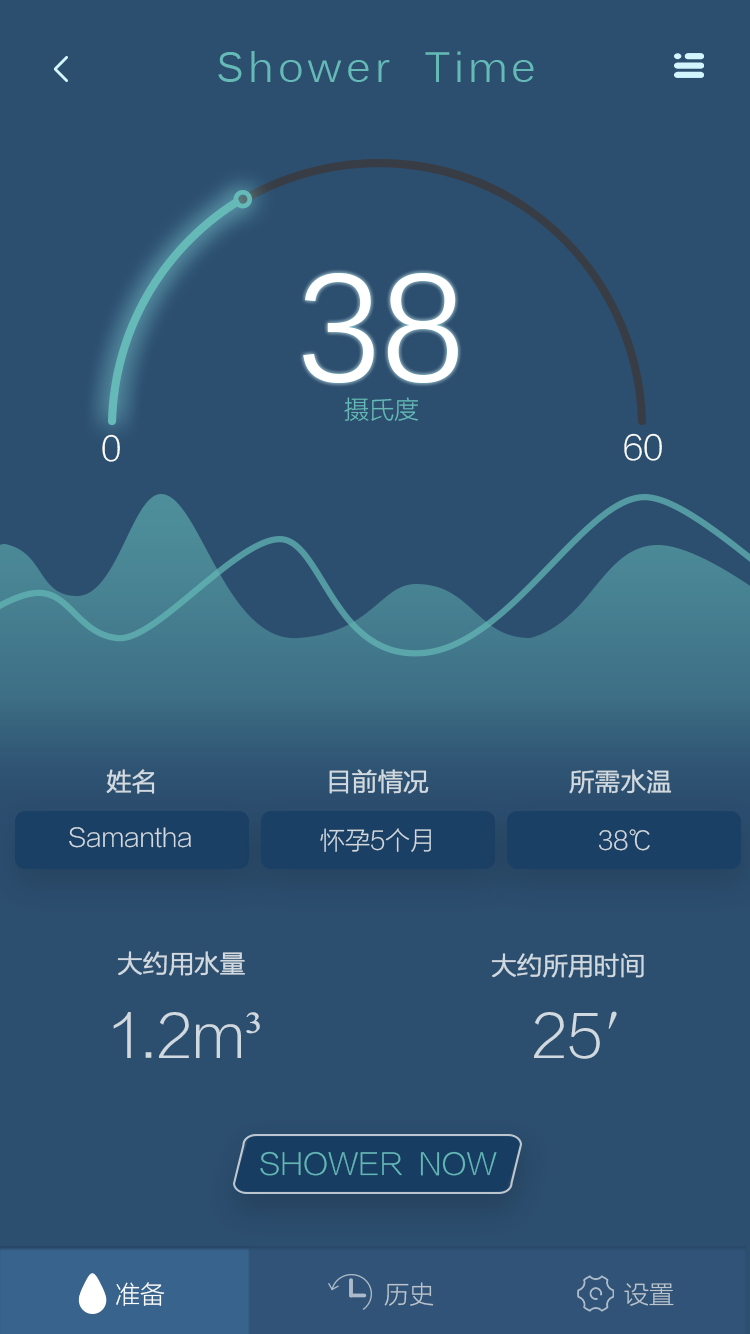
<style>
.page{position:relative;width:750px;height:1334px;background:#2c4e6f}
.page>*{position:absolute;margin:0}
.t1{font:41.7px "Kalinga";letter-spacing:0.1em;color:#65bab8}
.t2{font:150px "Kalinga";color:#ffffff}
.t3{font:25px "FZLTXHJW--GB1-0";color:#65bab8}
.t4{font:33.3px "FZLTXHJW--GB1-0";color:#f9fcfc}
.t5{font:25px "FZLTXHJW--GB1-0";color:#d0dae0;font-weight:bold}
.t6{font:25px "FZLTXHJW--GB1-0";color:#d0d9e0}
.t7{font:25px "FZLTXHJW--GB1-0";color:#d0d9e0;font-weight:bold}
.t8{font:58.3px "FZLTXHJW--GB1-0";color:#d0d9e0}
.t9{font:58.3px "SimSun";color:#d0d9e0}
.t10{font:29.2px "FZLTXHJW--GB1-0";color:#63b7b6}
.t11{font:25px "FZLTXHJW--GB1-0";color:#f9fcfc}
.t12{font:25px "FZLTXHJW--GB1-0";color:#bac4cd}
</style>
<div class="page">
<p class="t1" style="left:218px;top:51px;width:316px;height:31px">Shower  Time</p>
<p class="t2" style="left:303px;top:273px;width:155px;height:110px">38</p>
<p class="t3" style="left:344px;top:397px;width:74px;height:24px">摄氏度</p>
<p class="t4" style="left:102px;top:434px;width:18px;height:28px">0</p>
<p class="t4" style="left:624px;top:433px;width:38px;height:28px">60</p>
<p class="t5" style="left:106px;top:769px;width:49px;height:25px">姓名</p>
<p class="t5" style="left:329px;top:769px;width:100px;height:25px">目前情况</p>
<p class="t5" style="left:569px;top:769px;width:103px;height:25px">所需水温</p>
<p class="t6" style="left:69px;top:827px;width:122px;height:21px">Samantha</p>
<p class="t6" style="left:320px;top:828px;width:111px;height:24px">怀孕5个月</p>
<p class="t6" style="left:599px;top:829px;width:51px;height:22px">38℃</p>
<p class="t7" style="left:117px;top:951px;width:128px;height:25px">大约用水量</p>
<p class="t7" style="left:491px;top:953px;width:153px;height:25px">大约所用时间</p>
<p class="t8" style="left:113px;top:1012px;width:147px;height:46px">1.2m<span class="t9">³</span></p>
<p class="t8" style="left:534px;top:1011px;width:83px;height:48px">25′</p>
<p class="t10" style="left:260px;top:1151px;width:237px;height:25px">SHOWER  NOW</p>
<p class="t11" style="left:116px;top:1282px;width:49px;height:24px">准备</p>
<p class="t12" style="left:384px;top:1282px;width:50px;height:24px">历史</p>
<p class="t12" style="left:624px;top:1283px;width:50px;height:23px">设置</p>
</div>
